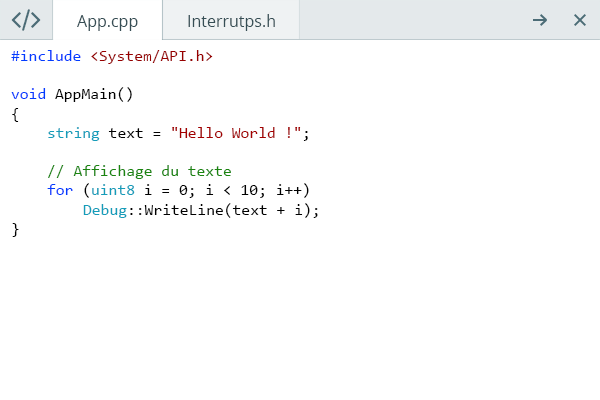
<style>
.page{position:relative;width:600px;height:400px;background:#ffffff}
.page>*{position:absolute;margin:0}
.t1{font:16px "OpenSans";color:#364e55}
.t2{font:16px "Consolas";color:#000000}
.t3{font:16px "Consolas";color:#013dff}
.t4{font:16px "Consolas";color:#980000}
.t5{font:16px "Consolas";color:#149dba}
.t6{font:16px "Consolas";color:#a40000}
.t7{font:16px "Consolas";color:#1a850f}
</style>
<div class="page">
<p class="t1" style="left:77px;top:15px;width:61px;height:16px">App.cpp</p>
<p class="t1" style="left:188px;top:14px;width:87px;height:17px">Interrutps.h</p>
<p class="t2" style="left:11px;top:50px;width:307px;height:187px;text-align:right"><span class="t3">#include </span><span class="t4">&lt;System/API.h&gt;<br><br></span><span class="t3">void </span>AppMain()<br>{<br> <span class="t5">string </span>text = <span class="t6">"Hello World !"</span>;<br><br> <span class="t7">// Affichage du texte<br> </span><span class="t3">for </span>(<span class="t5">uint8 </span>i = 0; i &lt; 10; i++)<br>  <span class="t5">Debug</span>::WriteLine(text + i);<br>}</p>
</div>
